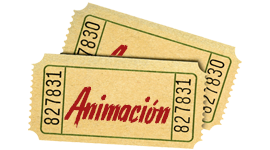
<style>
.page{position:relative;width:270px;height:150px;background:#ffffff}
.page>*{position:absolute;margin:0}
.t1{font:64.5px "Stranger-back-in-the-Night";color:#a51818}
</style>
<div class="page">
<p class="t1" style="left:64px;top:86px;width:107px;height:42px;rotate:3deg">Animación</p>
</div>
